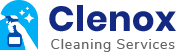
<style>
.page{position:relative;width:176px;height:52px;background:#ffffff}
.page>*{position:absolute;margin:0}
.t1{font:35px "Poppins-Bold";letter-spacing:0.01em;color:#142981}
.t2{font:14px "NunitoSans-Regular";letter-spacing:0.06em;color:#646464}
</style>
<div class="page">
<p class="t1" style="left:49px;top:5px;width:127px;height:27px">Clenox</p>
<p class="t2" style="left:51px;top:39px;width:124px;height:13px">Cleaning Services</p>
</div>
